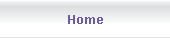
<style>
.page{position:relative;width:170px;height:39px;background:#ffffff}
.page>*{position:absolute;margin:0}
.t1{font:13.2px "Verdana-Bold";color:#6d5ca0;scale:0.83 1}
</style>
<div class="page">
<p class="t1" style="left:68px;top:15px;width:35px;height:9px">Home</p>
</div>
